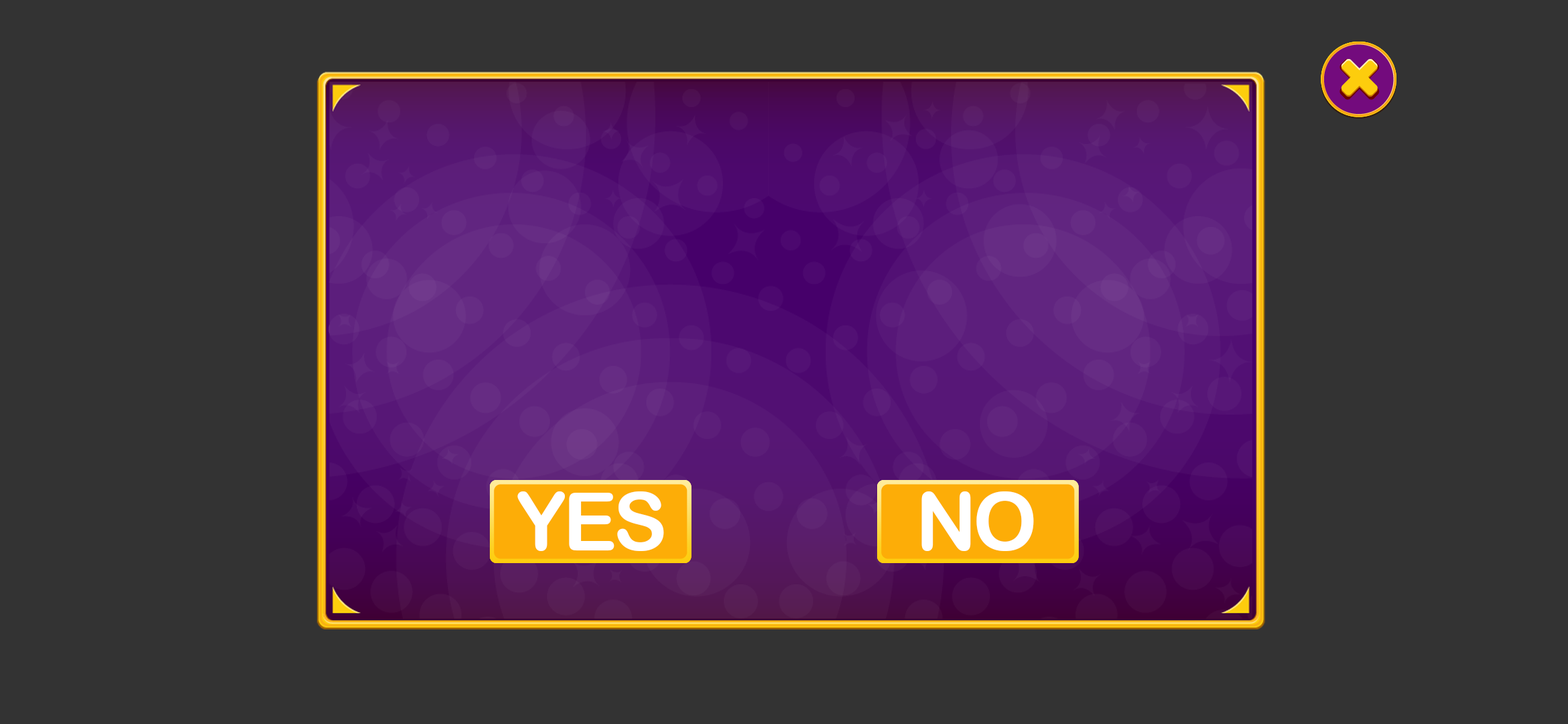
<style>
.page{position:relative;width:1568px;height:724px;background:#333333}
.page>*{position:absolute;margin:0}
.t1{font:81.3px "ArialRoundedMTBold";letter-spacing:-0.05em;color:#ffffff;text-transform:uppercase}
</style>
<div class="page">
<p class="t1" style="left:517px;top:491px;width:147px;height:60px">YES</p>
<p class="t1" style="left:517px;top:491px;width:147px;height:60px">YES</p>
<p class="t1" style="left:517px;top:491px;width:147px;height:60px">YES</p>
<p class="t1" style="left:921px;top:491px;width:113px;height:60px">NO</p>
<p class="t1" style="left:921px;top:491px;width:113px;height:60px">NO</p>
<p class="t1" style="left:921px;top:491px;width:113px;height:60px">NO</p>
</div>
